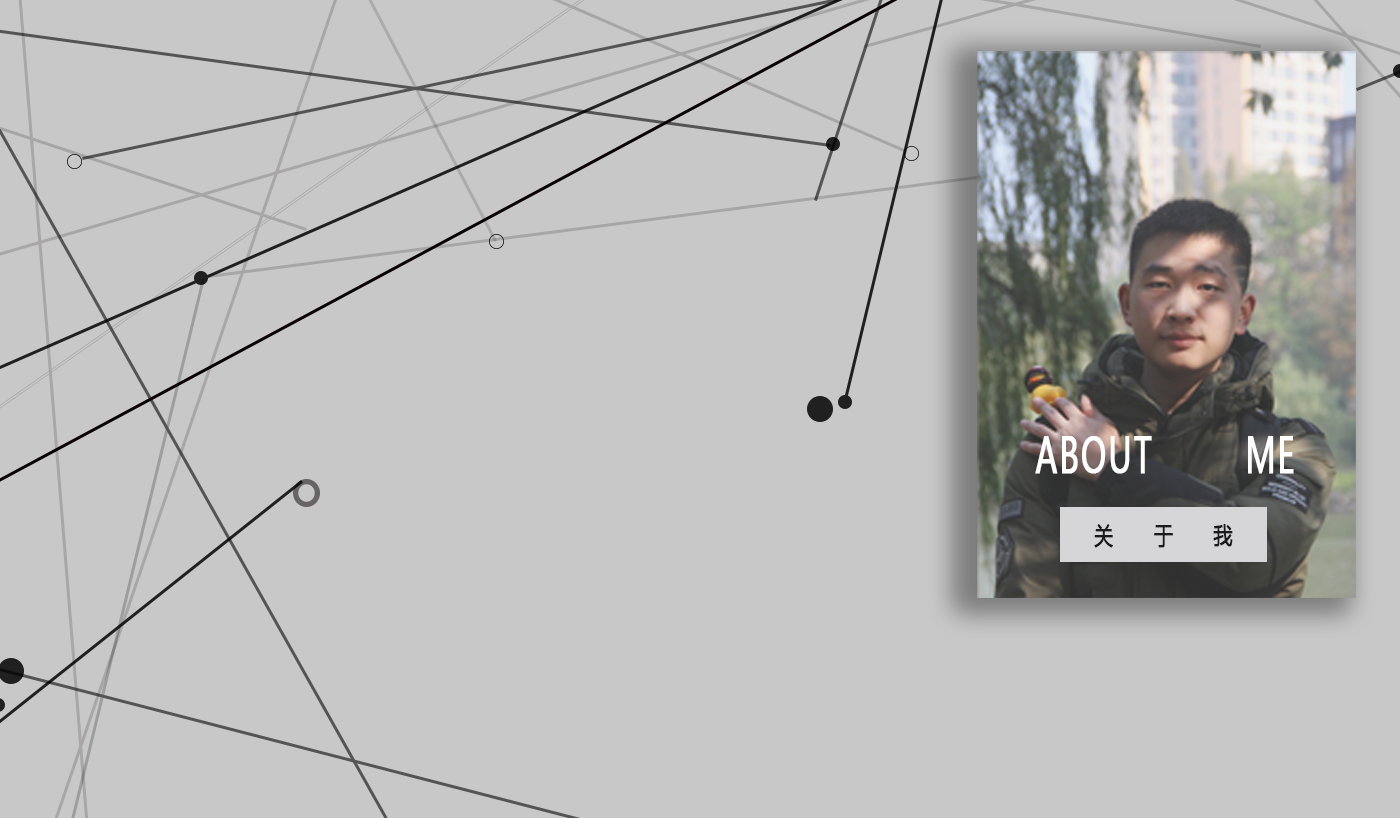
<style>
.page{position:relative;width:1400px;height:818px;background:#c8c8c8}
.page>*{position:absolute;margin:0}
.t1{font:48.2px "MicrosoftYaHei";letter-spacing:0.05em;color:#fffefe;font-weight:bold;scale:0.64 1}
.t2{font:25px "MicrosoftYaHei";letter-spacing:0.5em;color:#1a1a1a;font-weight:bold;scale:0.75 1}
</style>
<div class="page">
<p class="t1" style="left:1035px;top:436px;width:259px;height:38px">ABOUT        ME</p>
<p class="t2" style="left:1094px;top:524px;width:139px;height:24px">关  于  我</p>
</div>
